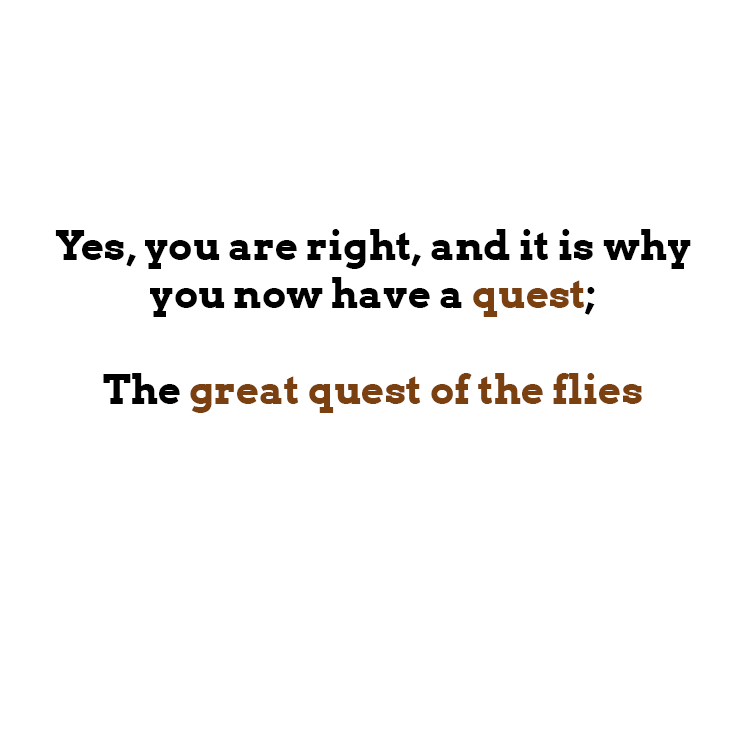
<style>
.page{position:relative;width:741px;height:741px;background:#ffffff}
.page>*{position:absolute;margin:0}
.t1{font:40px "Arvo-Bold";color:#000000}
.t2{font:40px "Arvo-Bold";color:#7a4010}
</style>
<div class="page">
<p class="t1" style="left:55px;top:229px;width:636px;height:184px;text-align:center">Yes, you are right, and it is why you now have a <span class="t2">quest</span>;<br><br>The <span class="t2">great quest of the flies</span></p>
</div>
